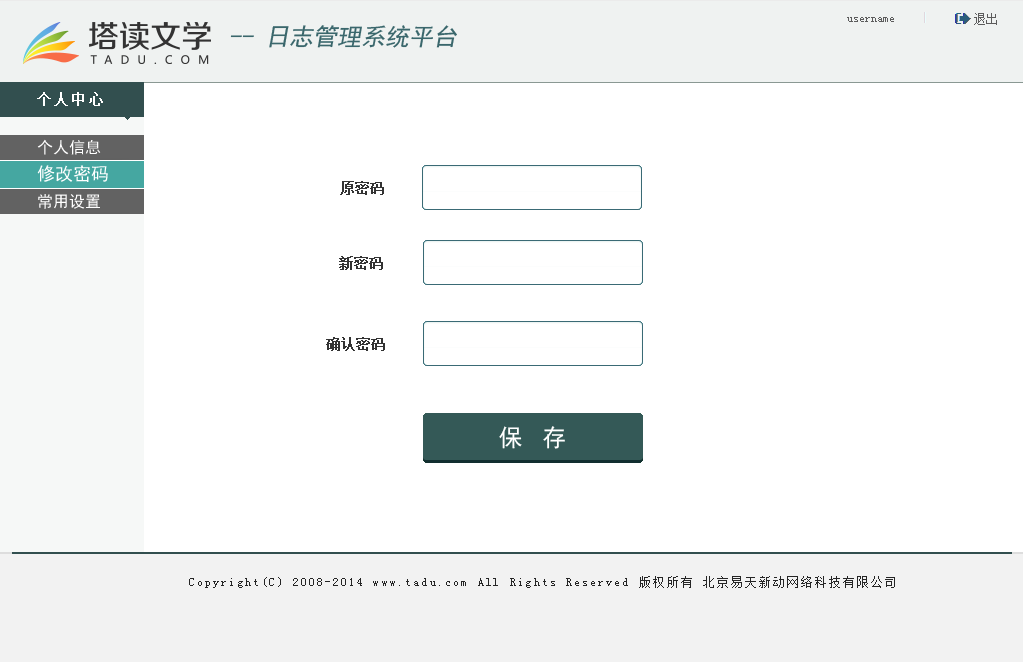
<style>
.page{position:relative;width:1023px;height:662px;background:#ffffff}
.page>*{position:absolute;margin:0}
.t1{font:12px "SimSun";color:#5c5c5c}
.t2{font:24px "SimHei";color:#3a676c;font-style:italic}
.t3{font:14px "SimSun";letter-spacing:0.2em;color:#ffffff;font-weight:bold}
.t4{font:16px "SimHei";color:#ffffff}
.t5{font:18px "SimHei";color:#ffffff}
.t6{font:14px "SimSun";color:#333333;font-weight:bold}
.t7{font:24px "SimHei";letter-spacing:0.2em;color:#ffffff}
.t8{font:12px "SimSun";letter-spacing:0.2em;color:#252525}
</style>
<div class="page">
<p class="t1" style="left:847px;top:17px;width:47px;height:5px">username</p>
<p class="t1" style="left:974px;top:13px;width:23px;height:12px">退出</p>
<p class="t2" style="left:230px;top:25px;width:227px;height:23px">-- 日志管理系统平台</p>
<p class="t3" style="left:37px;top:92px;width:66px;height:14px">个人中心</p>
<p class="t4" style="left:37px;top:139px;width:64px;height:16px">个人信息</p>
<p class="t5" style="left:37px;top:165px;width:71px;height:17px">修改密码</p>
<p class="t6" style="left:340px;top:181px;width:44px;height:14px">原密码</p>
<p class="t4" style="left:38px;top:194px;width:62px;height:15px">常用设置</p>
<p class="t6" style="left:339px;top:256px;width:44px;height:14px">新密码</p>
<p class="t6" style="left:326px;top:337px;width:59px;height:14px">确认密码</p>
<p class="t7" style="left:499px;top:426px;width:66px;height:23px">保 存</p>
<p class="t8" style="left:189px;top:576px;width:706px;height:12px">Copyright(C) 2008-2014 www.tadu.com All Rights Reserved 版权所有 北京易天新动网络科技有限公司</p>
</div>
